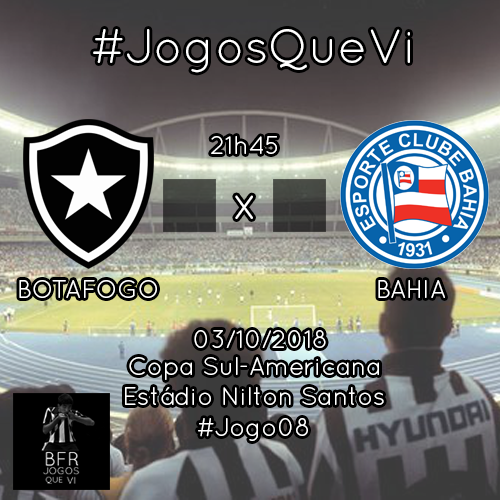
<style>
.page{position:relative;width:500px;height:500px}
.page>*{position:absolute;margin:0}
.t1{font:48px "QuicksandBook-Regular";color:#ffffff}
.t2{font:25px "QuicksandBook-Regular";color:#ffffff}
</style>
<div class="page">
<p class="t1" style="left:93px;top:29px;width:317px;height:44px">#JogosQueVi</p>
<p class="t2" style="left:211px;top:136px;width:66px;height:18px">21h45</p>
<p class="t1" style="left:235px;top:195px;width:18px;height:24px">x</p>
<p class="t2" style="left:19px;top:280px;width:138px;height:18px">BOTAFOGO</p>
<p class="t2" style="left:378px;top:280px;width:67px;height:18px">BAHIA</p>
<p class="t2" style="left:194px;top:330px;width:132px;height:18px">03/10/2018</p>
<p class="t2" style="left:129px;top:357px;width:250px;height:23px">Copa Sul-Americana</p>
<p class="t2" style="left:125px;top:387px;width:259px;height:18px">Estádio Nilton Santos</p>
<p class="t2" style="left:198px;top:418px;width:110px;height:23px">#Jogo08</p>
</div>
